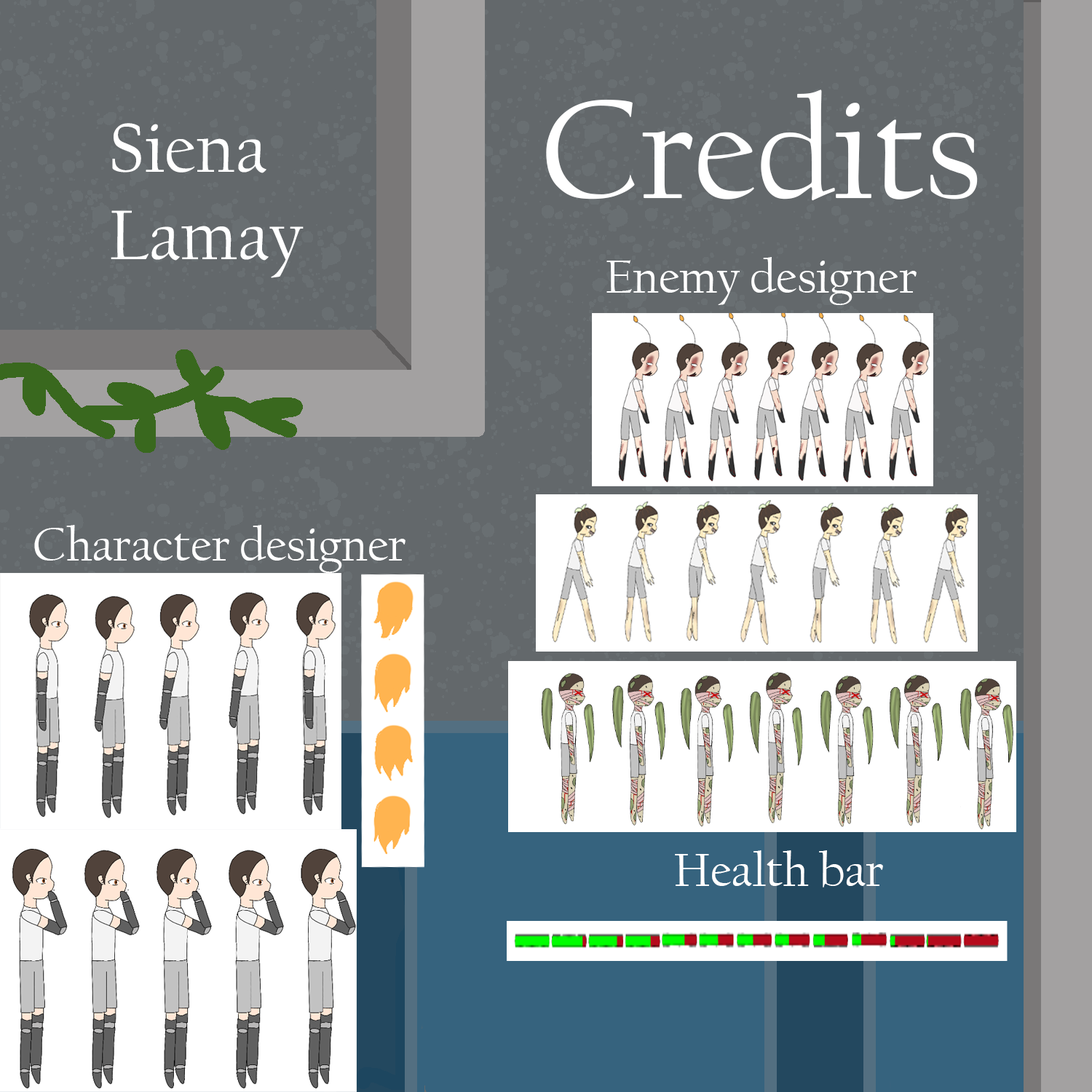
<style>
.page{position:relative;width:1092px;height:1092px;background:#63686b}
.page>*{position:absolute;margin:0}
.t1{font:145.6px "CalifornianFB-Reg";color:#ffffff}
.t2{font:72.8px "CalifornianFB-Reg";color:#ffffff}
.t3{font:48.5px "CalifornianFB-Reg";color:#ffffff}
</style>
<div class="page">
<p class="t1" style="left:546px;top:90px;width:432px;height:111px">Credits</p>
<p class="t2" style="left:111px;top:123px;width:193px;height:155px">Siena<br>Lamay</p>
<p class="t3" style="left:606px;top:257px;width:311px;height:48px">Enemy designer</p>
<p class="t3" style="left:34px;top:525px;width:371px;height:48px">Character designer</p>
<p class="t3" style="left:675px;top:850px;width:208px;height:37px">Health bar</p>
</div>
